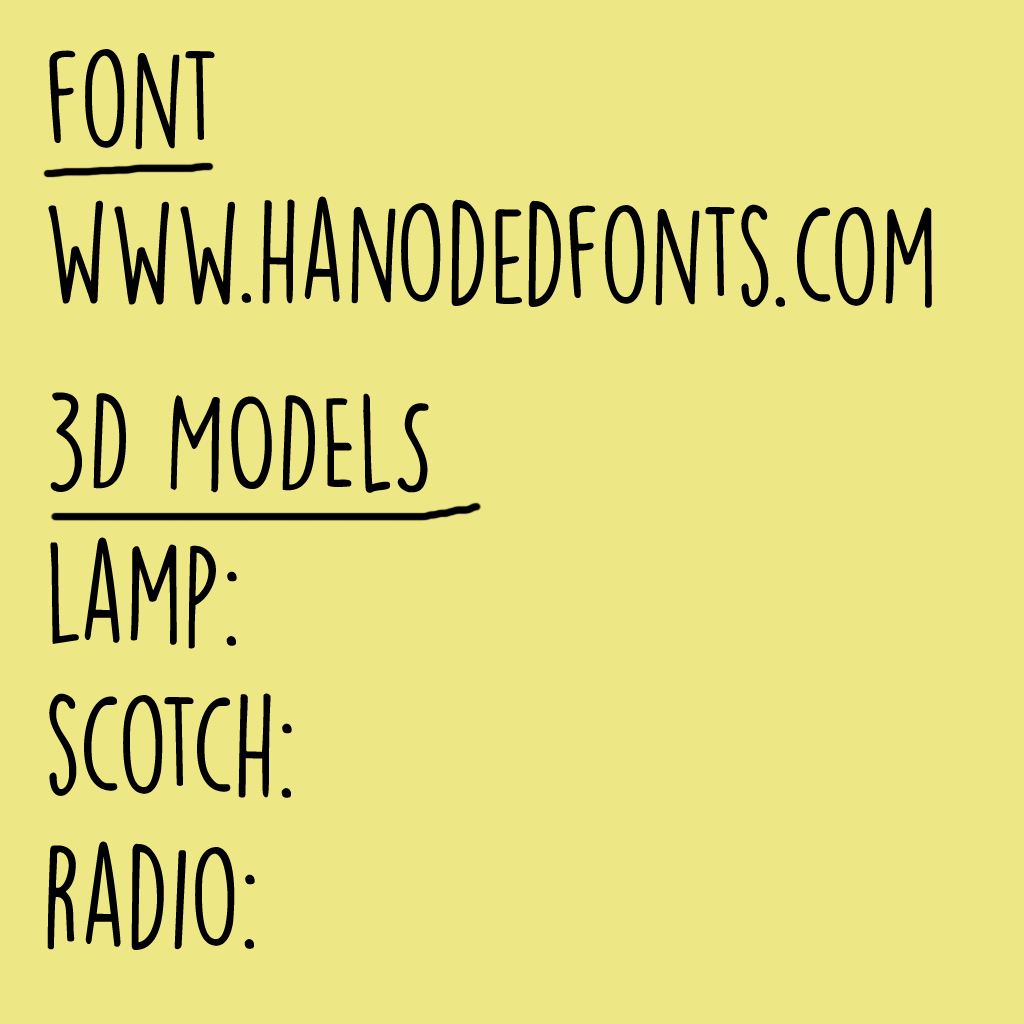
<style>
.page{position:relative;width:1024px;height:1024px;background:#eee785}
.page>*{position:absolute;margin:0}
.t1{font:126.3px "DKLemonYellowSun";color:#000000;scale:0.92 1}
</style>
<div class="page">
<p class="t1" style="left:48px;top:49px;width:884px;height:259px;text-align:right">font<br>www.hanodedfonts.com</p>
<p class="t1" style="left:47px;top:392px;width:382px;height:558px">3D MODELS<br>lamp:<br>scotch:<br>radio:</p>
</div>
